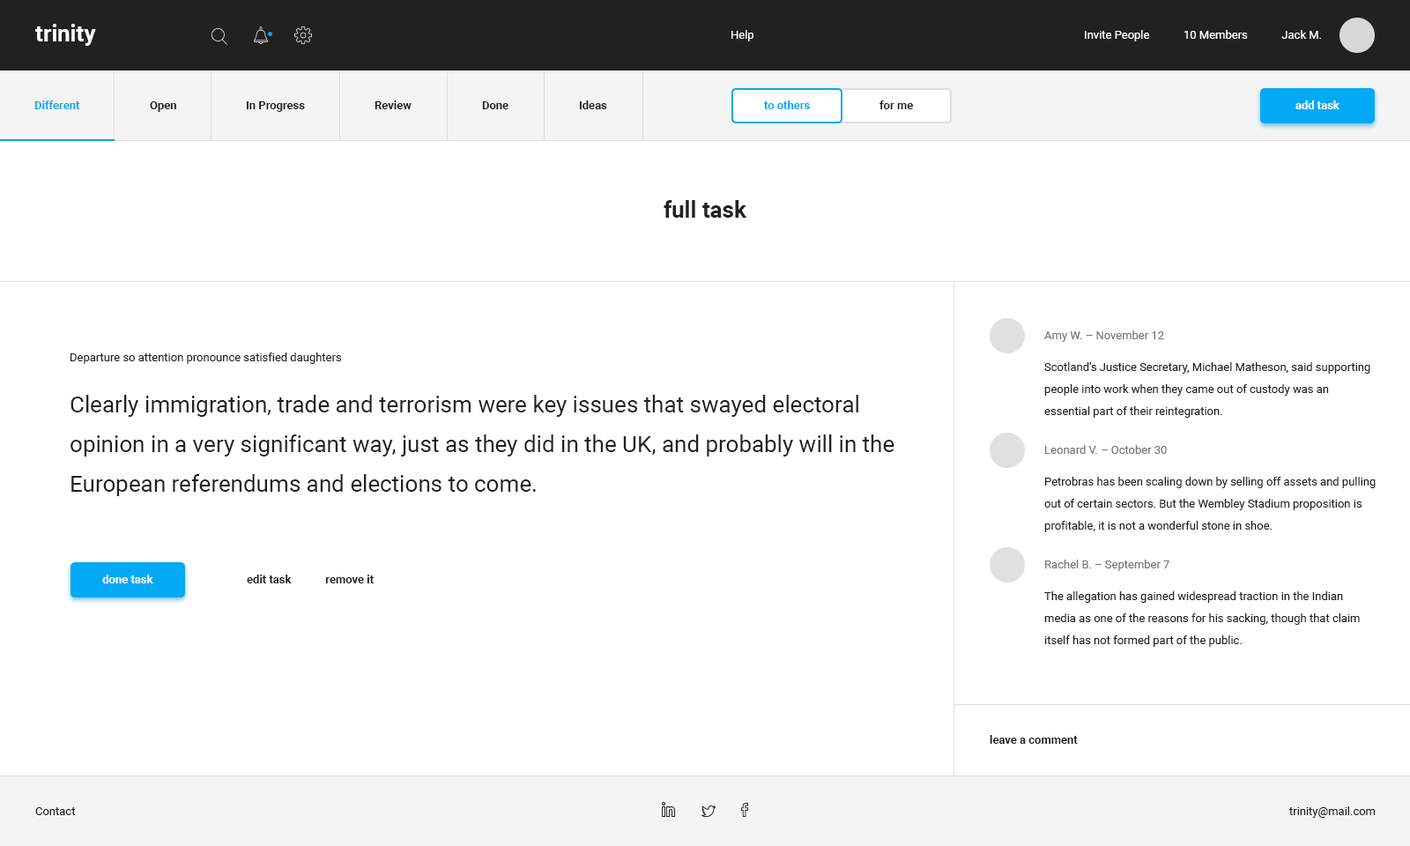
<style>
.page{position:relative;width:1410px;height:846px;background:#ffffff}
.page>*{position:absolute;margin:0}
.t1{font:22.9px "Roboto-Bold";color:#ffffff}
.t2{font:11.5px "Roboto-Regular";color:#ffffff}
.t3{font:11.5px "Roboto-Bold";color:#03a9f4}
.t4{font:11.5px "Roboto-Bold";color:#212121}
.t5{font:11.5px "Roboto-Bold";color:#ffffff}
.t6{font:22.9px "Roboto-Bold";color:#212121}
.t7{font:11.5px "Roboto-Regular";color:#757575}
.t8{font:11.5px "Roboto-Regular";color:#212121}
.t9{font:11.5px/22px "Roboto-Regular";color:#212121}
.t10{font:22.9px/39.6px "Roboto-Regular";color:#212121}
</style>
<div class="page">
<p class="t1" style="left:35px;top:24px;width:61px;height:22px">trinity</p>
<p class="t2" style="left:731px;top:30px;width:22px;height:11px">Help</p>
<p class="t2" style="left:1085px;top:30px;width:236px;height:11px">Invite People            10 Members            Jack M.</p>
<p class="t3" style="left:34px;top:100px;width:46px;height:9px">Different</p>
<p class="t4" style="left:150px;top:101px;width:26px;height:11px">Open</p>
<p class="t4" style="left:246px;top:101px;width:59px;height:11px">In Progress</p>
<p class="t4" style="left:374px;top:100px;width:37px;height:9px">Review</p>
<p class="t4" style="left:482px;top:101px;width:26px;height:8px">Done</p>
<p class="t4" style="left:579px;top:100px;width:28px;height:9px">Ideas</p>
<p class="t3" style="left:763px;top:100px;width:47px;height:9px">to others</p>
<p class="t4" style="left:879px;top:100px;width:34px;height:9px">for me</p>
<p class="t5" style="left:1295px;top:100px;width:44px;height:9px">add task</p>
<p class="t6" style="left:663px;top:200px;width:84px;height:18px">full task</p>
<p class="t7" style="left:1044px;top:330px;width:120px;height:12px">Amy W. – November 12</p>
<p class="t8" style="left:70px;top:352px;width:272px;height:12px">Departure so attention pronounce satisfied daughters</p>
<p class="t9" style="left:1044px;top:362px;width:326px;height:56px">Scotland’s Justice Secretary, Michael Matheson, said supporting people into work when they came out of custody was an <br>essential part of their reintegration.</p>
<p class="t10" style="left:70px;top:395px;width:824px;height:101px">Clearly immigration, trade and terrorism were key issues that swayed electoral opinion in a very significant way, just as they did in the UK, and probably will in the European referendums and elections to come.</p>
<p class="t7" style="left:1045px;top:445px;width:122px;height:9px">Leonard V. – October 30</p>
<p class="t9" style="left:1044px;top:477px;width:331px;height:55px">Petrobras has been scaling down by selling off assets and pulling out of certain sectors. But the Wembley Stadium proposition is profitable, it is not a wonderful stone in shoe.</p>
<p class="t7" style="left:1044px;top:559px;width:125px;height:12px">Rachel B. – September 7</p>
<p class="t5" style="left:102px;top:574px;width:51px;height:9px">done task</p>
<p class="t4" style="left:247px;top:574px;width:127px;height:9px">edit task            remove it</p>
<p class="t9" style="left:1044px;top:591px;width:316px;height:56px">The allegation has gained widespread traction in the Indian media as one of the reasons for his sacking, though that claim itself has not formed part of the public.</p>
<p class="t4" style="left:989px;top:735px;width:89px;height:9px">leave a comment</p>
<p class="t8" style="left:35px;top:807px;width:41px;height:8px">Contact</p>
<p class="t8" style="left:1288px;top:806px;width:87px;height:12px">trinity@mail.com</p>
</div>
